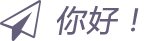
<style>
.page{position:relative;width:151px;height:41px;background:#ffffff}
.page>*{position:absolute;margin:0}
.t1{font:30px "MicrosoftYaHei";letter-spacing:0.05em;color:#655e7a;font-style:italic}
</style>
<div class="page">
<p class="t1" style="left:56px;top:6px;width:83px;height:29px">你好！</p>
</div>
